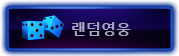
<style>
.page{position:relative;width:179px;height:56px}
.page>*{position:absolute;margin:0}
.t1{font:15px "MalgunGothicBold";color:#a9a4c1}
</style>
<div class="page">
<p class="t1" style="left:72px;top:22px;width:59px;height:14px">랜덤영웅</p>
</div>
